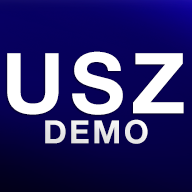
<style>
.page{position:relative;width:192px;height:192px}
.page>*{position:absolute;margin:0}
.t1{font:84px "HelveticaNeue-Bold";letter-spacing:0.075em;color:#ffffff}
.t2{font:32px "HelveticaNeue-Bold";letter-spacing:0.075em;color:#ffffff}
</style>
<div class="page">
<p class="t1" style="left:7px;top:51px;width:177px;height:64px">USZ</p>
<p class="t2" style="left:45px;top:119px;width:103px;height:25px">DEMO</p>
</div>
